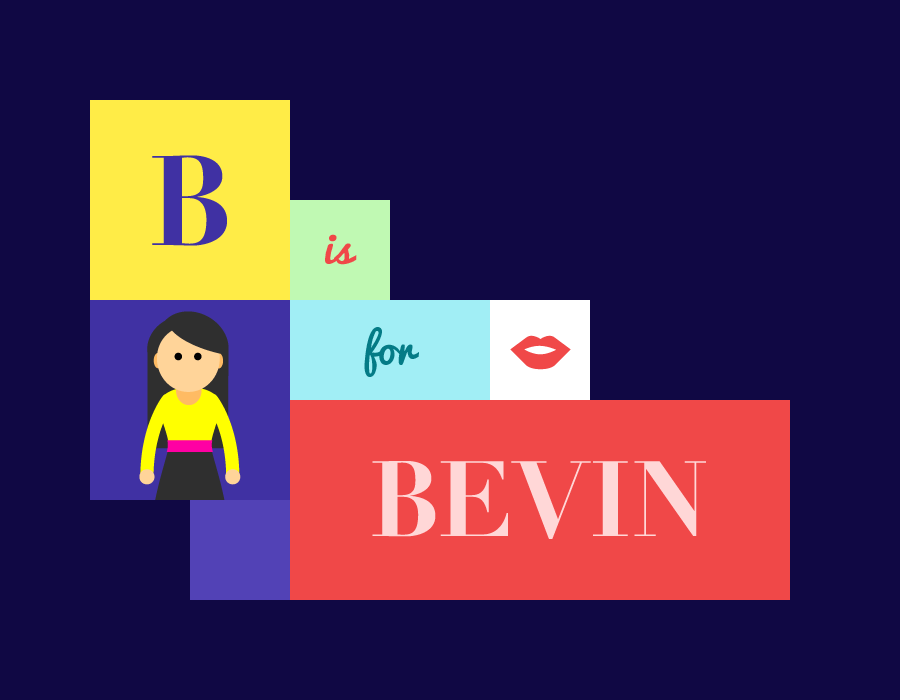
<style>
.page{position:relative;width:900px;height:700px;background:#100844}
.page>*{position:absolute;margin:0}
.t1{font:125px "DidotLTStd-Bold";color:#4031a3}
.t2{font:42px "Pacifico";color:#f04848}
.t3{font:42px "Pacifico";color:#047b86}
.t4{font:105px "DidotLTStd-Bold";color:#ffd7d7}
</style>
<div class="page">
<p class="t1" style="left:152px;top:155px;width:75px;height:91px">B</p>
<p class="t2" style="left:325px;top:234px;width:32px;height:31px">is</p>
<p class="t3" style="left:364px;top:327px;width:55px;height:50px">for</p>
<p class="t4" style="left:372px;top:461px;width:334px;height:78px">BEVIN</p>
</div>
